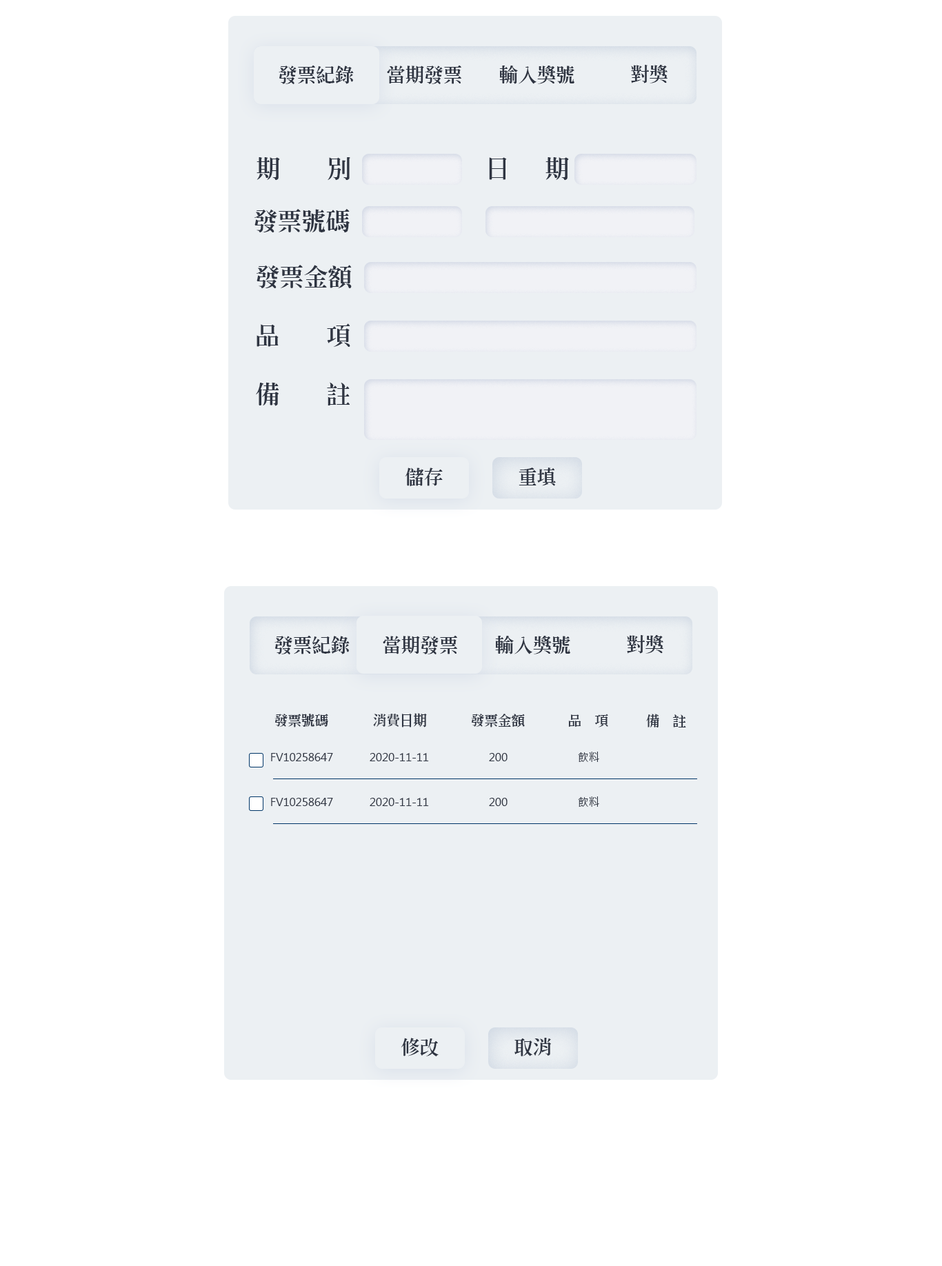
<style>
.page{position:relative;width:942px;height:1266px;background:#ffffff}
.page>*{position:absolute;margin:0}
.t1{font:19.3px "StdsungEG-Extra-Big5";letter-spacing:-0.02em;color:#2f3542}
.t2{font:24.7px "StdsungEG-Extra-Big5";letter-spacing:-0.02em;color:#2f3542}
.t3{font:13.8px "StdsungEG-Extra-Big5";letter-spacing:-0.02em;color:#2f3542}
.t4{font:10.8px "MicrosoftJhengHeiRegular";color:#2f3542}
</style>
<div class="page">
<p class="t1" style="left:279px;top:65px;width:75px;height:19px">發票紀錄</p>
<p class="t1" style="left:387px;top:65px;width:74px;height:19px">當期發票</p>
<p class="t1" style="left:499px;top:66px;width:75px;height:18px">輸入獎號</p>
<p class="t1" style="left:631px;top:65px;width:36px;height:18px">對獎</p>
<p class="t2" style="left:257px;top:157px;width:93px;height:23px">期    別</p>
<p class="t2" style="left:489px;top:157px;width:80px;height:23px">日   期</p>
<p class="t2" style="left:254px;top:209px;width:96px;height:23px">發票號碼</p>
<p class="t2" style="left:256px;top:265px;width:96px;height:23px">發票金額</p>
<p class="t2" style="left:257px;top:323px;width:93px;height:24px">品    項</p>
<p class="t2" style="left:256px;top:382px;width:94px;height:24px">備    註</p>
<p class="t1" style="left:405px;top:468px;width:38px;height:18px">儲存</p>
<p class="t1" style="left:519px;top:468px;width:37px;height:18px">重填</p>
<p class="t1" style="left:274px;top:635px;width:76px;height:19px">發票紀錄</p>
<p class="t1" style="left:383px;top:635px;width:74px;height:19px">當期發票</p>
<p class="t1" style="left:495px;top:636px;width:75px;height:18px">輸入獎號</p>
<p class="t1" style="left:627px;top:635px;width:36px;height:19px">對獎</p>
<p class="t3" style="left:274px;top:714px;width:54px;height:13px">發票號碼</p>
<p class="t3" style="left:373px;top:713px;width:54px;height:14px">消費日期</p>
<p class="t3" style="left:471px;top:714px;width:54px;height:13px">發票金額</p>
<p class="t3" style="left:568px;top:714px;width:40px;height:13px">品  項</p>
<p class="t3" style="left:646px;top:714px;width:40px;height:13px">備  註</p>
<p class="t4" style="left:271px;top:753px;width:62px;height:8px">FV10258647</p>
<p class="t4" style="left:370px;top:753px;width:59px;height:8px">2020-11-11</p>
<p class="t4" style="left:489px;top:753px;width:18px;height:8px">200</p>
<p class="t4" style="left:578px;top:752px;width:21px;height:10px">飲料</p>
<p class="t4" style="left:271px;top:798px;width:62px;height:8px">FV10258647</p>
<p class="t4" style="left:370px;top:798px;width:59px;height:8px">2020-11-11</p>
<p class="t4" style="left:489px;top:798px;width:18px;height:8px">200</p>
<p class="t4" style="left:578px;top:796px;width:21px;height:11px">飲料</p>
<p class="t1" style="left:401px;top:1038px;width:38px;height:18px">修改</p>
<p class="t1" style="left:514px;top:1038px;width:37px;height:18px">取消</p>
</div>
